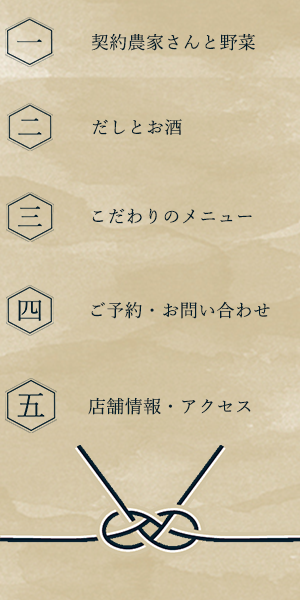
<style>
.page{position:relative;width:300px;height:600px}
.page>*{position:absolute;margin:0}
.t1{font:18px "YuMincho-Regular";letter-spacing:0.02em;color:#011b29}
</style>
<div class="page">
<p class="t1" style="left:91px;top:33px;width:164px;height:18px">契約農家さんと野菜</p>
<p class="t1" style="left:92px;top:119px;width:90px;height:16px">だしとお酒</p>
<p class="t1" style="left:92px;top:208px;width:160px;height:16px">こだわりのメニュー</p>
<p class="t1" style="left:91px;top:301px;width:179px;height:18px">ご予約・お問い合わせ</p>
<p class="t1" style="left:88px;top:397px;width:163px;height:18px">店舗情報・アクセス</p>
</div>
